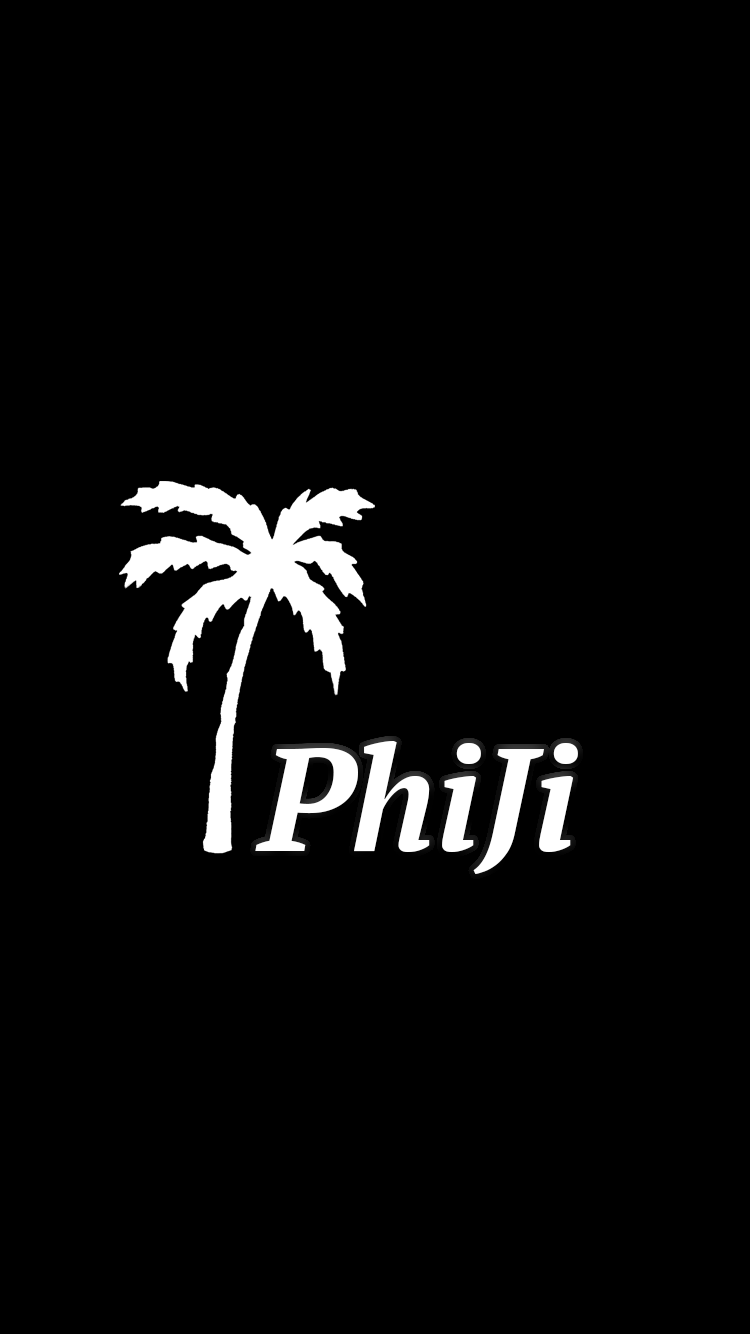
<style>
.page{position:relative;width:750px;height:1334px;background:#000000}
.page>*{position:absolute;margin:0}
.t1{font:145.6px "PTSerif-BoldItalic";color:#ffffff}
</style>
<div class="page">
<p class="t1" style="left:255px;top:741px;width:323px;height:133px">PhiJi</p>
</div>
